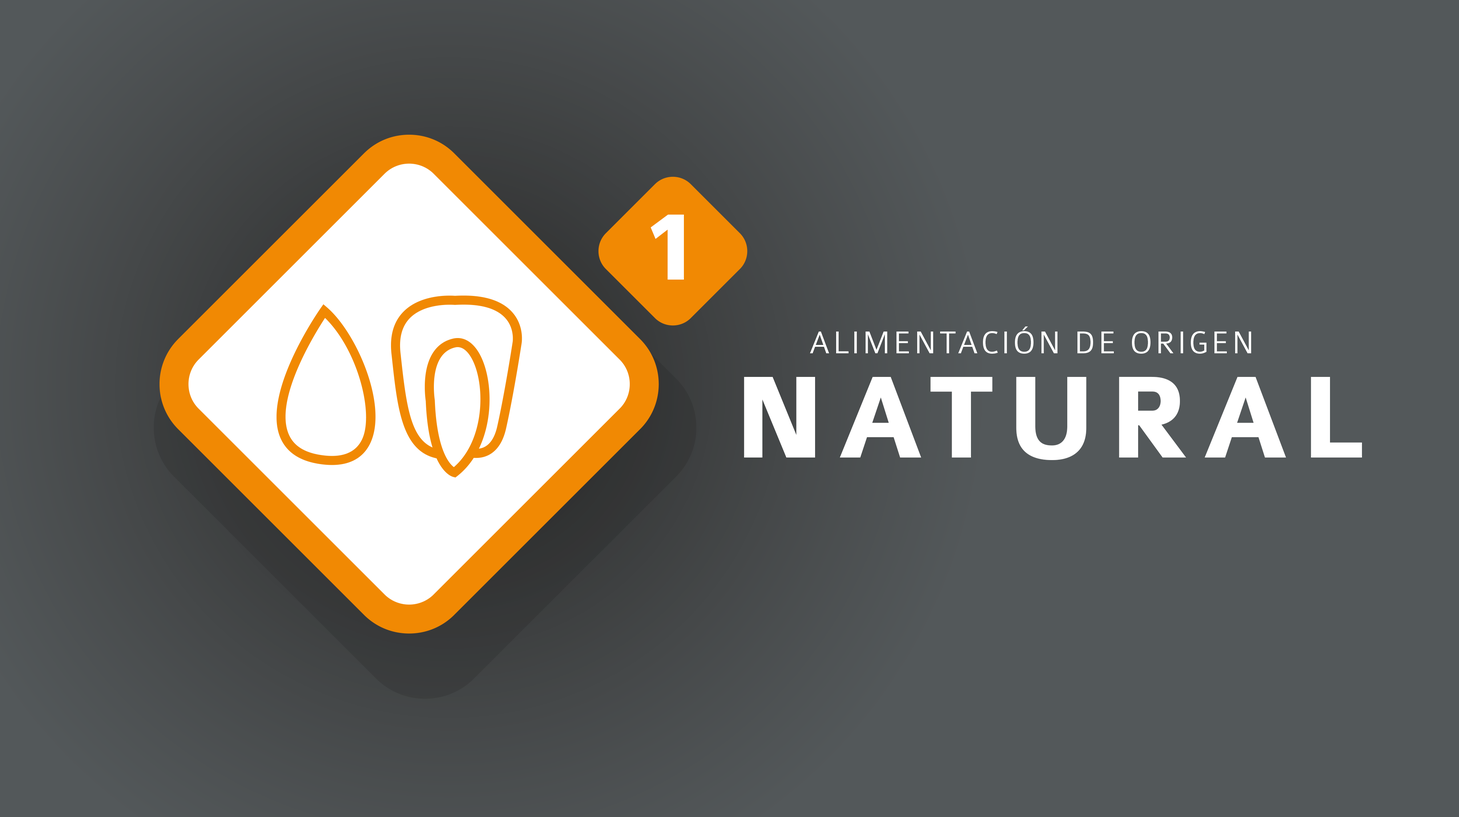
<style>
.page{position:relative;width:1459px;height:817px;background:#53585a}
.page>*{position:absolute;margin:0}
.t1{font:106.9px "Colaborate-Bold";letter-spacing:0.08em;color:#ffffff}
.t2{font:33.6px/104px "Colaborate-Light";letter-spacing:0.08em;color:#ffffff}
.t3{font:124.8px/104px "Colaborate-Bold";letter-spacing:0.08em;color:#ffffff}
</style>
<div class="page">
<p class="t1" style="left:650px;top:215px;width:34px;height:65px">1</p>
<p class="t2" style="left:744px;top:327px;width:618px;height:133px">ALIMENTACIÓN DE ORIGEN<br><span class="t3">NATURAL</span></p>
</div>
